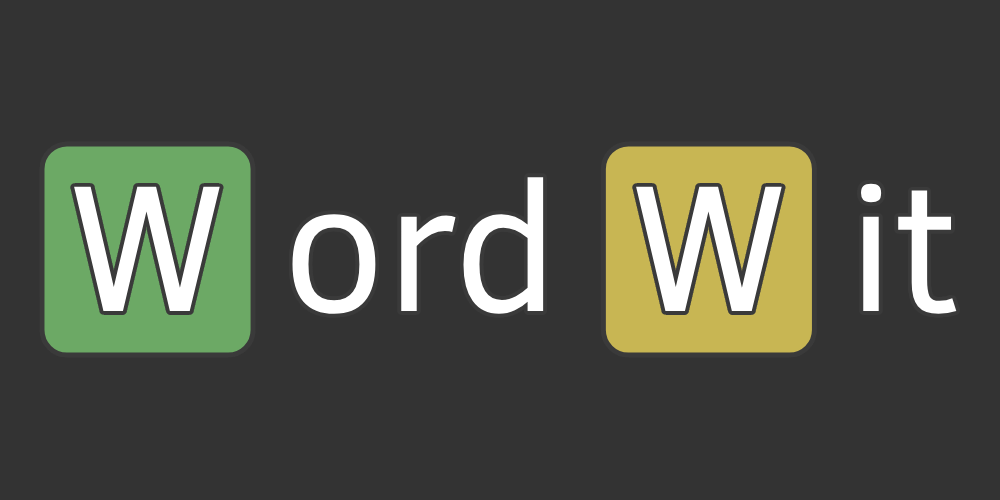
<style>
.page{position:relative;width:1000px;height:500px;background:#333333}
.page>*{position:absolute;margin:0}
.t1{font:183.9px "ClearSans";color:#ffffff}
</style>
<div class="page">
<p class="t1" style="left:292px;top:177px;width:252px;height:137px">ord</p>
<p class="t1" style="left:861px;top:183px;width:96px;height:131px">it</p>
<p class="t1" style="left:74px;top:186px;width:146px;height:125px">W</p>
<p class="t1" style="left:636px;top:186px;width:146px;height:125px">W</p>
</div>
